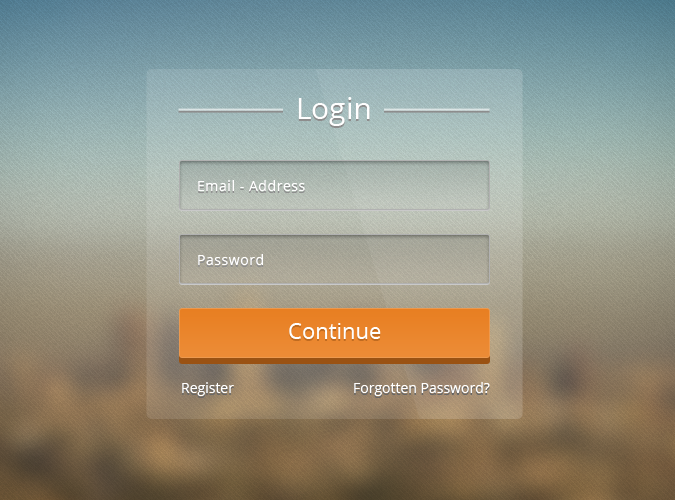
<style>
.page{position:relative;width:675px;height:500px}
.page>*{position:absolute;margin:0}
.t1{font:30px "OpenSans";color:#ffffff}
.t2{font:14px "OpenSans";letter-spacing:0.04em;color:#ffffff}
.t3{font:22px "OpenSans";color:#ffffff}
.t4{font:14px "OpenSans";color:#ffffff}
</style>
<div class="page">
<p class="t1" style="left:298px;top:97px;width:72px;height:29px">Login</p>
<p class="t2" style="left:198px;top:180px;width:107px;height:11px">Email - Address</p>
<p class="t2" style="left:198px;top:254px;width:65px;height:11px">Password</p>
<p class="t3" style="left:289px;top:323px;width:92px;height:16px">Continue</p>
<p class="t4" style="left:182px;top:382px;width:52px;height:14px">Register</p>
<p class="t4" style="left:354px;top:382px;width:136px;height:14px">Forgotten Password?</p>
</div>
